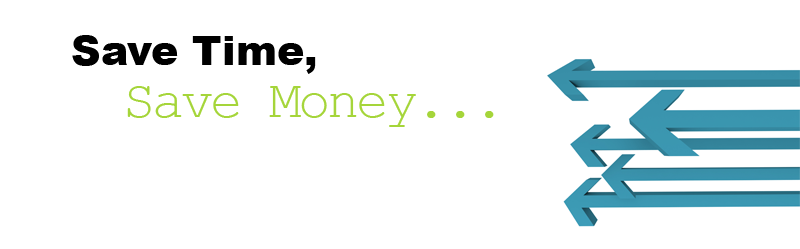
<style>
.page{position:relative;width:800px;height:249px;background:#ffffff}
.page>*{position:absolute;margin:0}
.t1{font:41px "Arial-Black";color:#000000}
.t2{font:54px "CourierNewPSMT";letter-spacing:-0.06em;color:#a5d53a}
</style>
<div class="page">
<p class="t1" style="left:72px;top:35px;width:244px;height:39px">Save Time,</p>
<p class="t2" style="left:127px;top:86px;width:367px;height:41px">Save Money...</p>
</div>
